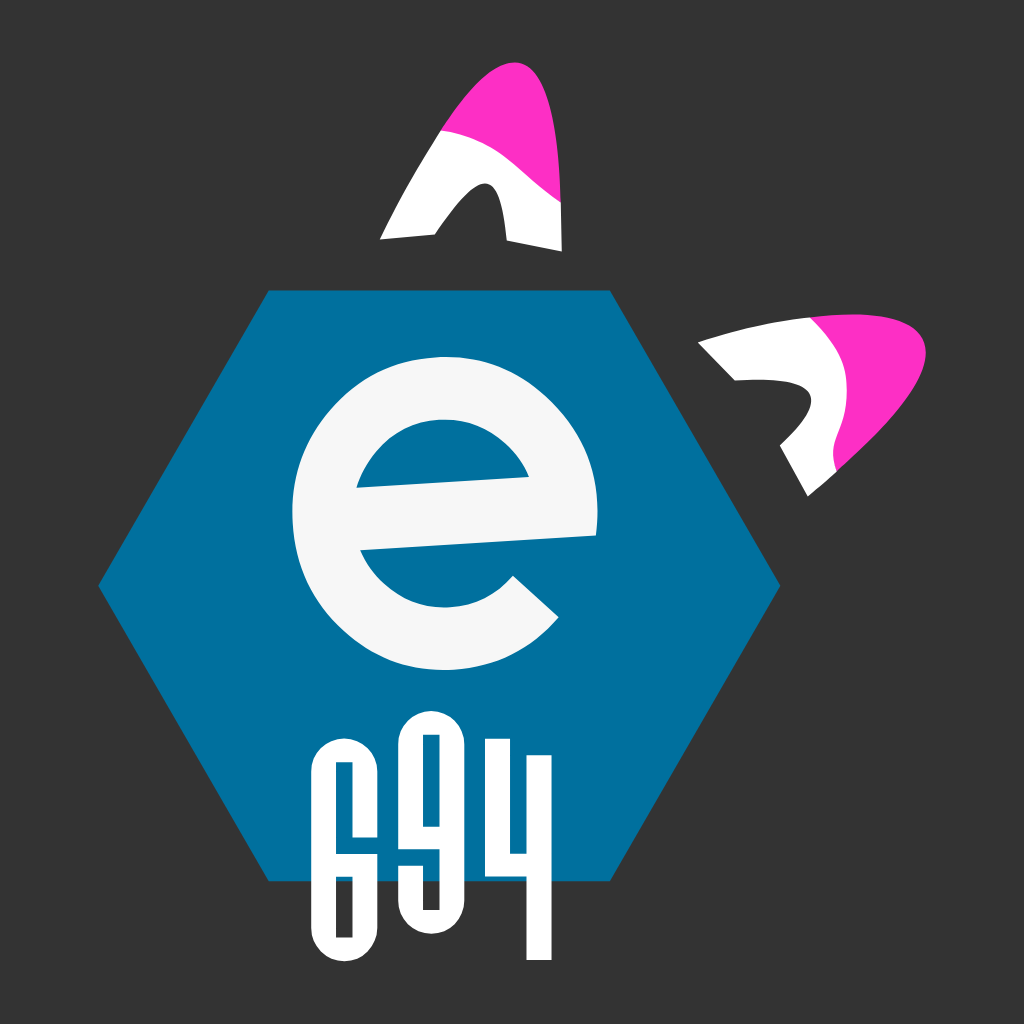
<style>
.page{position:relative;width:1024px;height:1024px;background:#333333}
.page>*{position:absolute;margin:0}
.t1{font:225.5px "PaulistanaIpe-Regular";color:#ffffff}
</style>
<div class="page">
<p class="t1" style="left:398px;top:711px;width:67px;height:223px">9</p>
<p class="t1" style="left:311px;top:738px;width:67px;height:224px">6</p>
<p class="t1" style="left:484px;top:738px;width:68px;height:222px">4</p>
</div>
